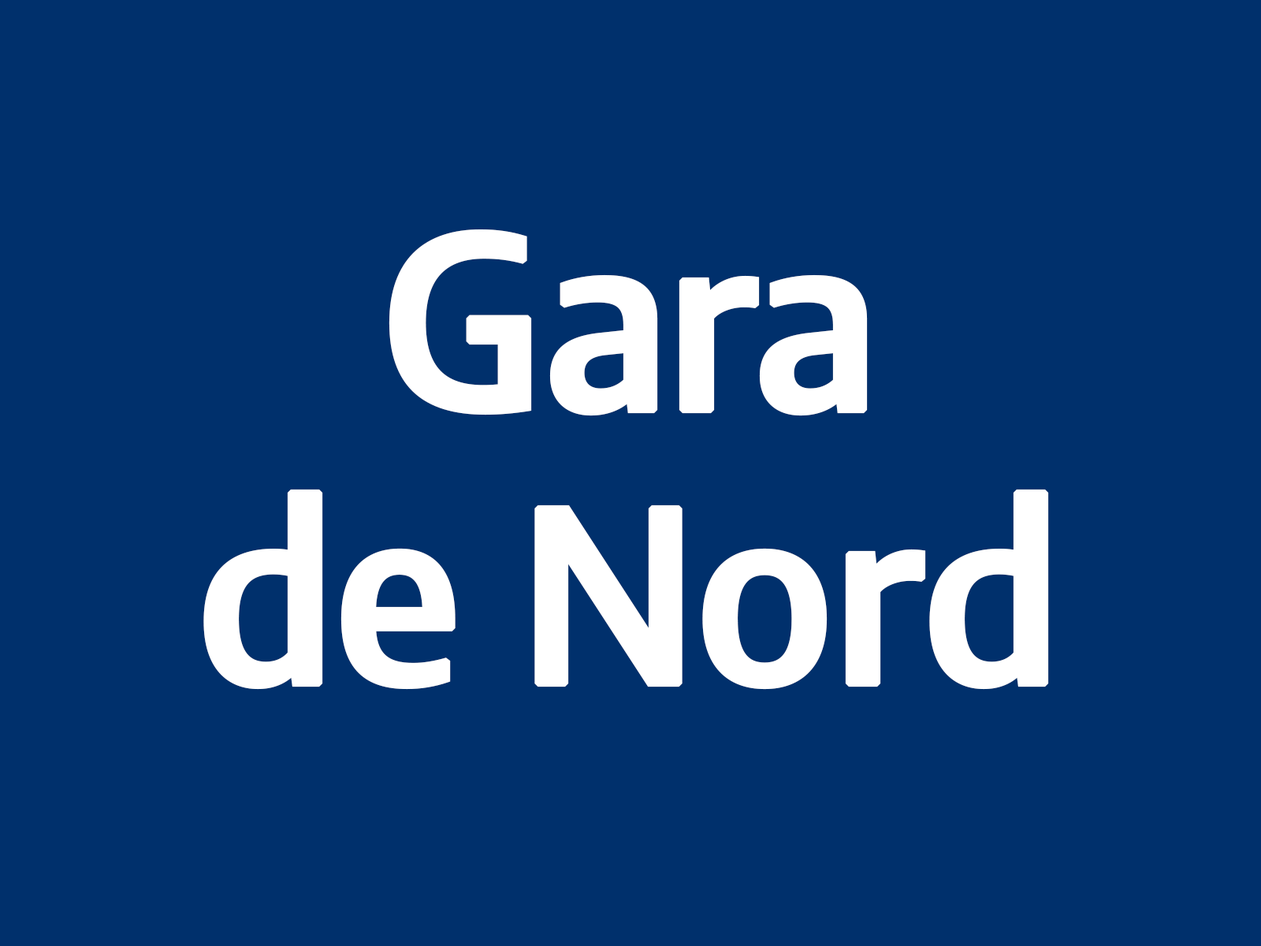
<style>
.page{position:relative;width:1261px;height:946px;background:#00306c}
.page>*{position:absolute;margin:0}
.t1{font:236.4px/272.7px "SalviaSans-Medium";color:#ffffff;font-weight:bold}
</style>
<div class="page">
<p class="t1" style="left:203px;top:229px;width:846px;height:461px;text-align:center">Gara<br>de Nord</p>
</div>
